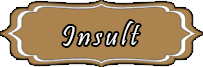
<style>
.page{position:relative;width:203px;height:67px;background:#aa834f}
.page>*{position:absolute;margin:0}
.t1{font:30px "Pristina-Regular";letter-spacing:0.125em;color:#ffffff}
</style>
<div class="page">
<p class="t1" style="left:63px;top:21px;width:77px;height:25px">Insult</p>
</div>
